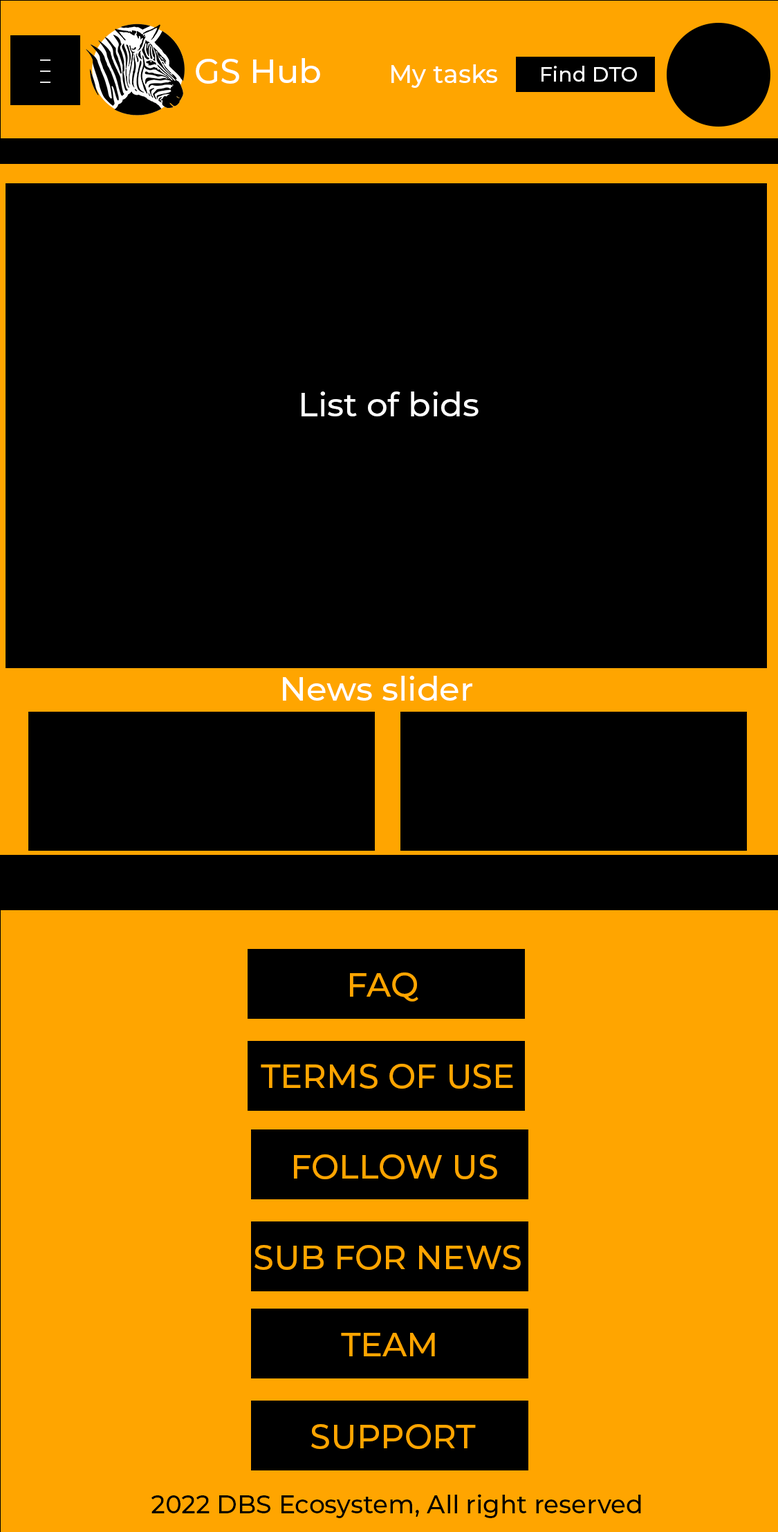
<style>
.page{position:relative;width:778px;height:1532px;background:#000000}
.page>*{position:absolute;margin:0}
.t1{font:20.8px/11.1px "Montserrat-Medium";color:#ffffff}
.t2{font:33.2px "Montserrat-Medium";color:#ffffff}
.t3{font:24.9px "Montserrat-Medium";color:#ffffff}
.t4{font:20.8px "Montserrat-Medium";color:#ffffff}
.t5{font:33.2px "Montserrat-Medium";color:#ffa500}
.t6{font:24.9px "Montserrat-Medium";color:#000000}
</style>
<div class="page">
<p class="t1" style="left:40px;top:59px;width:10px;height:24px;text-align:justify">_<br>_<br>_</p>
<p class="t2" style="left:196px;top:58px;width:124px;height:26px">GS Hub</p>
<p class="t3" style="left:392px;top:64px;width:105px;height:24px">My tasks</p>
<p class="t4" style="left:542px;top:66px;width:95px;height:16px">Find DTO</p>
<p class="t2" style="left:302px;top:392px;width:177px;height:24px">List of bids</p>
<p class="t2" style="left:283px;top:676px;width:189px;height:25px">News slider</p>
<p class="t5" style="left:350px;top:973px;width:69px;height:29px">FAQ</p>
<p class="t5" style="left:261px;top:1064px;width:252px;height:25px">TERMS OF USE</p>
<p class="t5" style="left:294px;top:1155px;width:203px;height:24px">FOLLOW US</p>
<p class="t5" style="left:255px;top:1245px;width:266px;height:25px">SUB FOR NEWS</p>
<p class="t5" style="left:341px;top:1333px;width:94px;height:24px">TEAM</p>
<p class="t5" style="left:311px;top:1424px;width:165px;height:25px">SUPPORT</p>
<p class="t6" style="left:151px;top:1494px;width:490px;height:24px">2022 DBS Ecosystem, All right reserved</p>
</div>
